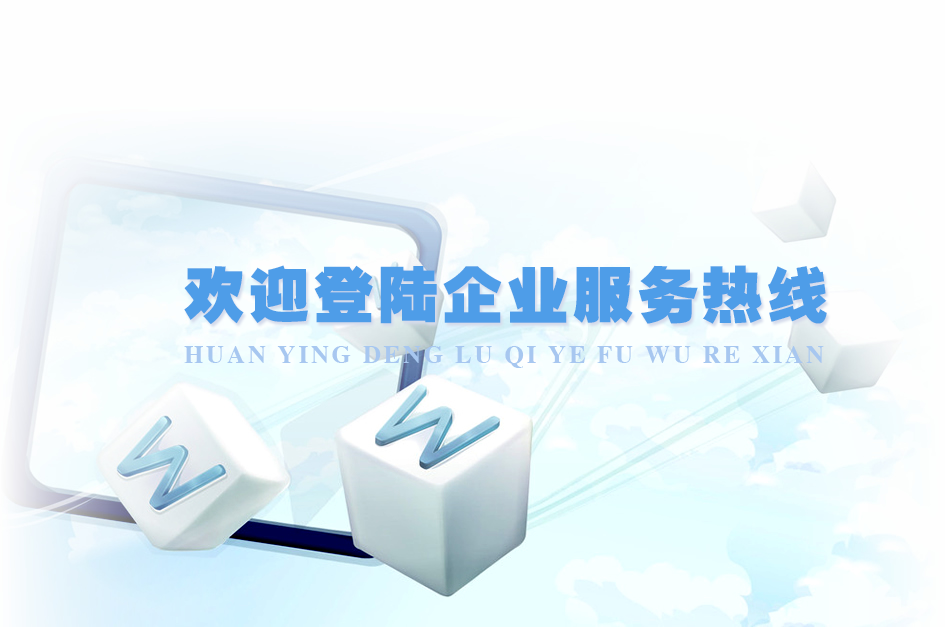
<style>
.page{position:relative;width:945px;height:627px;background:#fefefe}
.page>*{position:absolute;margin:0}
.t1{font:60px "FZCCHJW--GB1-0";letter-spacing:0.08em;color:#4e9de8}
.t2{font:25px "CTBiaoSongSJ";letter-spacing:0.11em;color:#a7c7f0}
</style>
<div class="page">
<p class="t1" style="left:184px;top:265px;width:643px;height:59px">欢迎登陆企业服务热线</p>
<p class="t2" style="left:184px;top:346px;width:640px;height:22px">HUAN YING DENG LU QI YE FU WU RE XIAN</p>
</div>
